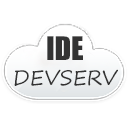
<style>
.page{position:relative;width:128px;height:128px;background:#ffffff}
.page>*{position:absolute;margin:0}
.t1{font:20.7px "SegoePrint";color:#333333}
.t2{font:30px "Impact";color:#333333}
</style>
<div class="page">
<p class="t1" style="left:14px;top:36px;width:104px;height:50px;text-align:center"><span class="t2">IDE<br></span>DEVSERV</p>
</div>
